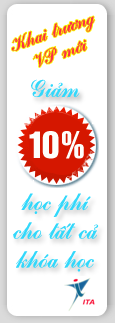
<style>
.page{position:relative;width:115px;height:323px;background:#ffffff}
.page>*{position:absolute;margin:0}
.t1{font:19.1px "VNI-Commerce-Bold-Italic";color:#fb3245}
.t2{font:24px "VNI-Commerce-Bold-Italic";color:#32d8fb}
.t3{font:36px "VNI-Swiss-Condense-Bold";color:#fefefb}
</style>
<div class="page">
<p class="t1" style="left:12px;top:16px;width:83px;height:51px;text-align:center;rotate:-20deg">Khai tröông<br>VP môùi</p>
<p class="t2" style="left:31px;top:79px;width:49px;height:19px">Giaûm</p>
<p class="t3" style="left:29px;top:131px;width:55px;height:28px">10%</p>
<p class="t2" style="left:13px;top:193px;width:86px;height:79px;text-align:center">hoïc phí<br>cho taát caû<br>khoùa hoïc</p>
</div>
